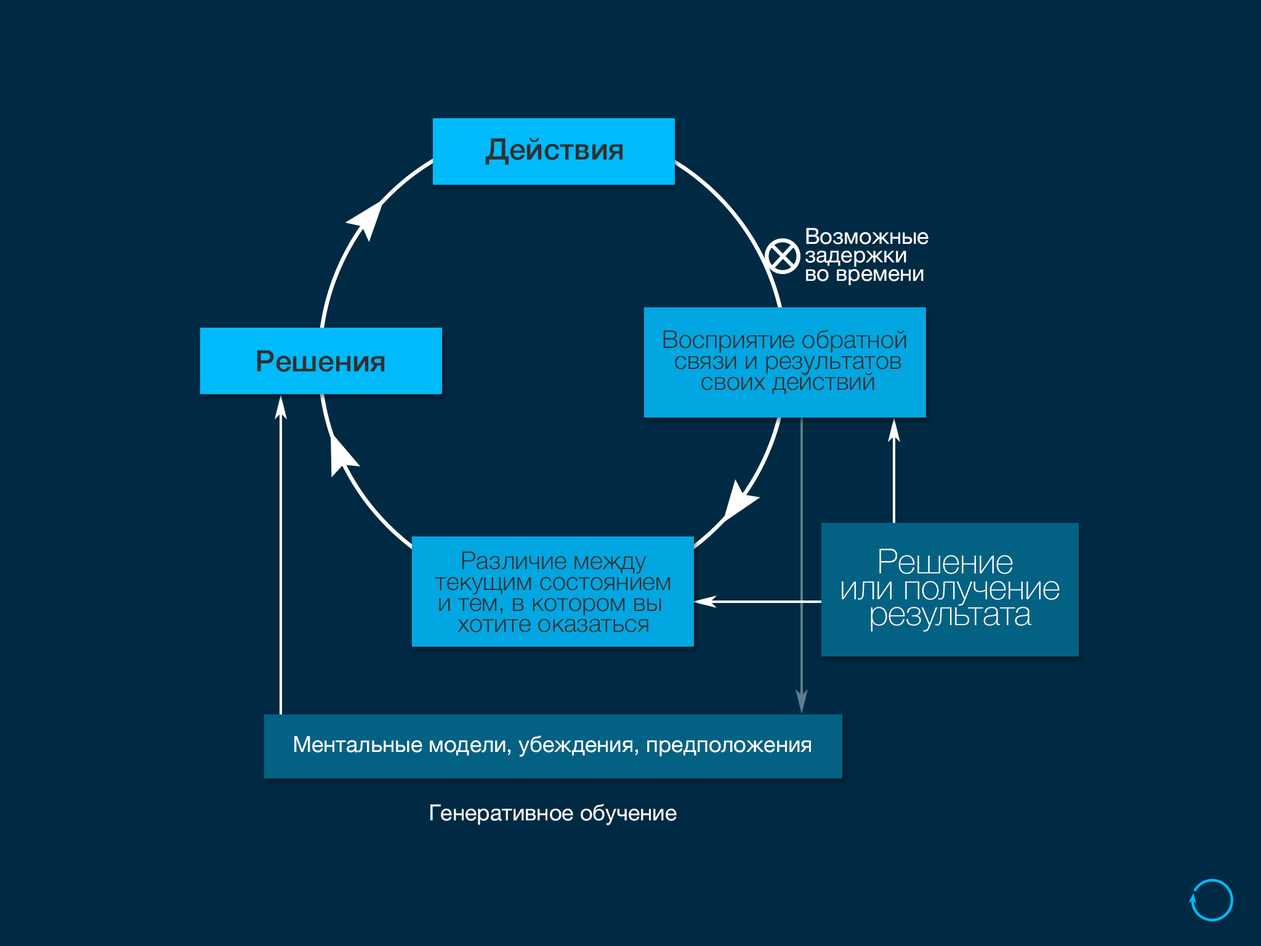
<style>
.page{position:relative;width:1261px;height:946px;background:#002a43}
.page>*{position:absolute;margin:0}
.t1{font:29.6px "HelveticaNeue-Medium";color:#303030}
.t2{font:22.2px/18.5px "HelveticaNeue";color:#ffffff}
.t3{font:24.6px/20.9px "HelveticaNeue-Light";color:#303030}
.t4{font:34.5px/25.9px "HelveticaNeue-Thin";color:#ffffff}
.t5{font:22.2px "HelveticaNeue";color:#ffffff}
</style>
<div class="page">
<p class="t1" style="left:485px;top:138px;width:138px;height:27px">Действия</p>
<p class="t2" style="left:805px;top:228px;width:123px;height:57px">Возможные<br>задержки<br>во времени</p>
<p class="t3" style="left:663px;top:329px;width:243px;height:65px;text-align:center">Восприятие обратной <br>связи и результатов<br>своих действий</p>
<p class="t1" style="left:257px;top:350px;width:128px;height:22px">Решения</p>
<p class="t3" style="left:435px;top:551px;width:235px;height:81px;text-align:center">Различие между<br>текущим состоянием<br>и тем, в котором вы <br>хотите оказаться</p>
<p class="t4" style="left:842px;top:549px;width:218px;height:83px;text-align:center">Решение <br>или получение<br>результата</p>
<p class="t5" style="left:294px;top:735px;width:517px;height:22px">Ментальные модели, убеждения, предположения</p>
<p class="t5" style="left:430px;top:803px;width:247px;height:22px">Генеративное обучение</p>
</div>
